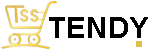
<style>
.page{position:relative;width:150px;height:50px;background:#ffffff}
.page>*{position:absolute;margin:0}
.t1{font:28.6px "Arial-BoldMT";color:#000000;text-transform:uppercase}
</style>
<div class="page">
<p class="t1" style="left:49px;top:17px;width:99px;height:21px">tendy</p>
</div>
